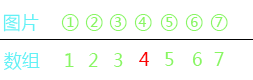
<style>
.page{position:relative;width:253px;height:80px;background:#ffffff}
.page>*{position:absolute;margin:0}
.t1{font:18px "MicrosoftYaHei";color:#62f1f6}
.t2{font:18px "MicrosoftYaHei";color:#89f662}
.t3{font:18px "MicrosoftYaHei";color:#fa0303}
</style>
<div class="page">
<p class="t1" style="left:3px;top:14px;width:36px;height:18px">图片</p>
<p class="t2" style="left:61px;top:14px;width:18px;height:17px">①</p>
<p class="t2" style="left:85px;top:14px;width:18px;height:17px">②</p>
<p class="t2" style="left:109px;top:14px;width:18px;height:17px">③</p>
<p class="t2" style="left:134px;top:14px;width:18px;height:17px">④</p>
<p class="t2" style="left:160px;top:14px;width:18px;height:17px">⑤</p>
<p class="t2" style="left:185px;top:14px;width:18px;height:17px">⑥</p>
<p class="t2" style="left:210px;top:14px;width:18px;height:17px">⑦</p>
<p class="t1" style="left:4px;top:52px;width:36px;height:18px">数组</p>
<p class="t2" style="left:65px;top:53px;width:9px;height:14px">1</p>
<p class="t2" style="left:88px;top:53px;width:10px;height:14px">2</p>
<p class="t2" style="left:114px;top:53px;width:9px;height:14px">3</p>
<p class="t3" style="left:139px;top:52px;width:10px;height:14px">4</p>
<p class="t2" style="left:165px;top:52px;width:9px;height:14px">5</p>
<p class="t2" style="left:192px;top:52px;width:10px;height:14px">6</p>
<p class="t2" style="left:214px;top:52px;width:10px;height:14px">7</p>
</div>
